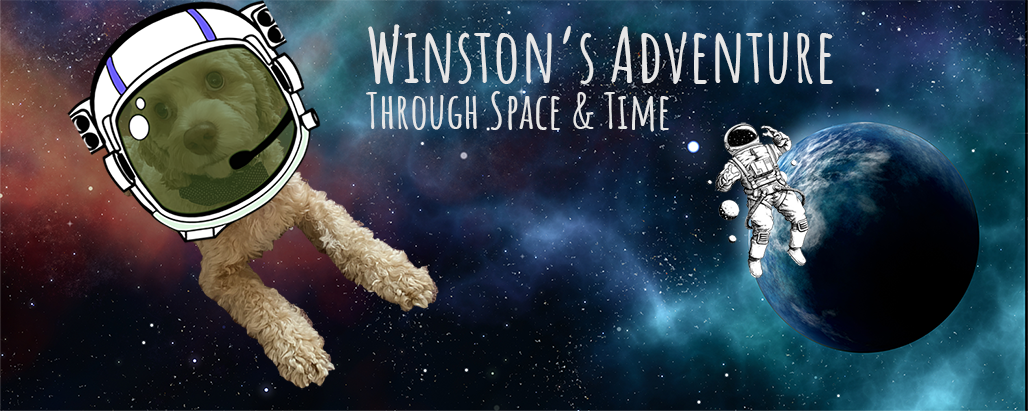
<style>
.page{position:relative;width:1028px;height:411px}
.page>*{position:absolute;margin:0}
.t1{font:75px "AmaticSC-Bold";color:#e6e6e6}
.t2{font:50px "AmaticSC-Bold";color:#e6e6e6}
</style>
<div class="page">
<p class="t1" style="left:368px;top:24px;width:465px;height:60px">Winston’s Adventure</p>
<p class="t2" style="left:366px;top:91px;width:303px;height:41px">Through Space &amp; Time</p>
</div>
